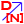
<style>
.page{position:relative;width:24px;height:24px;background:#ffffff}
.page>*{position:absolute;margin:0}
.t1{font:14px "CopperplateGothic-Bold";color:#ff0000}
.t2{font:12px "CopperplateGothic-Bold";color:#ff0000}
</style>
<div class="page">
<p class="t1" style="left:1px;top:1px;width:11px;height:9px">D</p>
<p class="t2" style="left:6px;top:13px;width:18px;height:10px">[N]</p>
</div>
